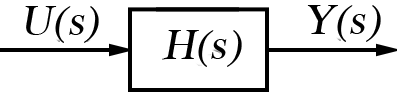
<style>
.page{position:relative;width:400px;height:100px;background:#ffffff}
.page>*{position:absolute;margin:0}
.t1{font:44px "Times-Roman";letter-spacing:0.005em;color:#000000;font-style:italic}
</style>
<div class="page">
<p class="t1" style="left:25px;top:6px;width:74px;height:37px">U(s)</p>
<p class="t1" style="left:307px;top:5px;width:74px;height:37px">Y(s)</p>
<p class="t1" style="left:163px;top:30px;width:79px;height:37px">H(s)</p>
</div>
